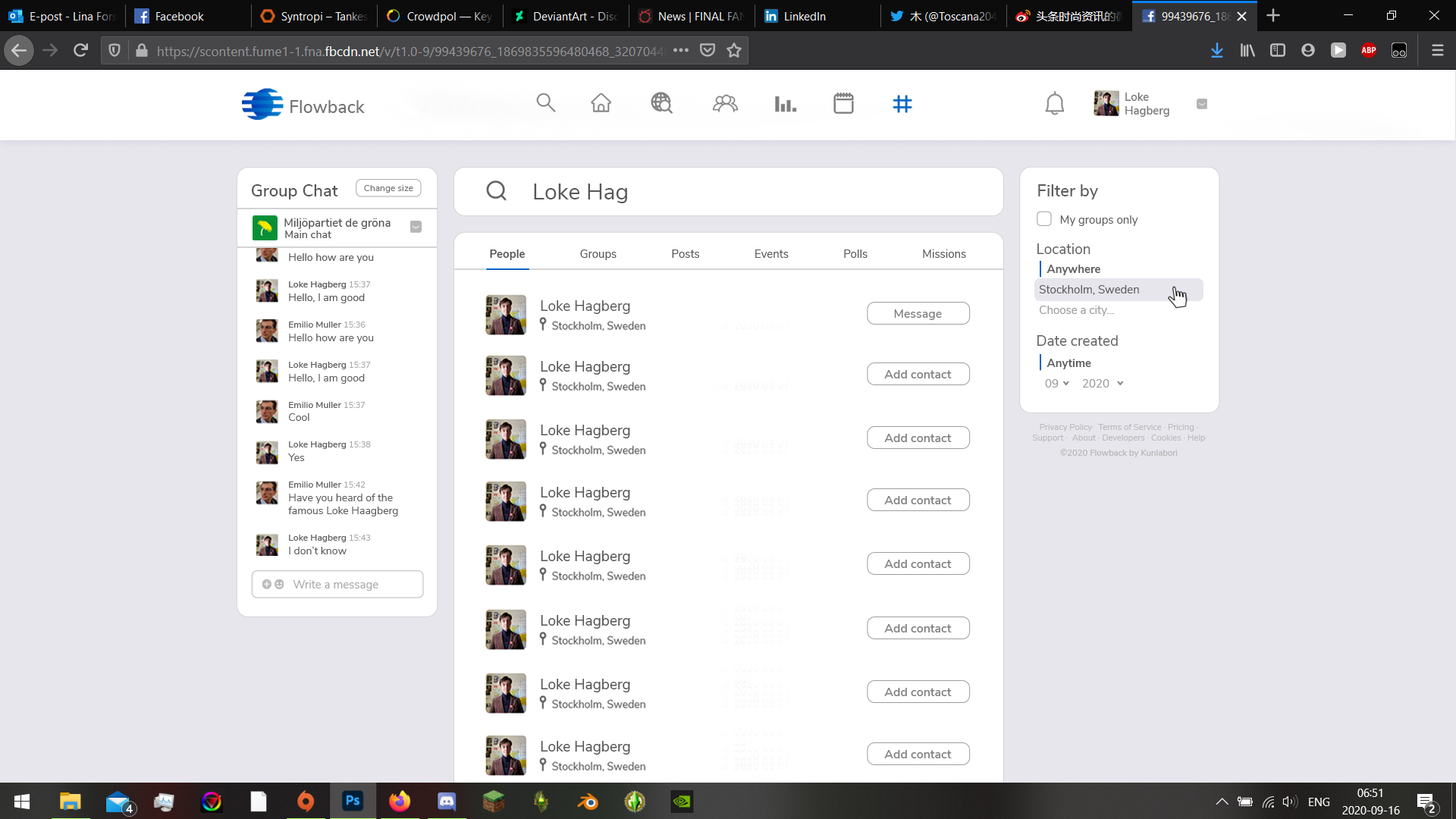
<style>
.page{position:relative;width:1456px;height:819px;background:#ffffff}
.page>*{position:absolute;margin:0}
.t1{font:17.4px "NunitoSans-SemiBold";color:#747474}
.t2{font:11.4px "NunitoSans-SemiBold";color:#747474}
.t3{font:11.4px/22.9px "NunitoSans-SemiBold";color:#747474}
.t4{font:16.7px "NunitoSans-SemiBold";color:#575757}
.t5{font:9.1px "NunitoSans-Regular";color:#727272}
.t6{font:22.7px "NunitoSans-Regular";color:#575757}
.t7{font:11.4px/20.5px "NunitoSans-Regular";color:#5e5e5e}
.t8{font:16.7px "NunitoSans-SemiBold";color:#5e5e5e}
.t9{font:11.4px/27.8px "NunitoSans-Regular";color:#5e5e5e}
.t10{font:14.4px/30.3px "NunitoSans-Regular";color:#5e5e5e}
.t11{font:11.4px/19px "NunitoSans-Bold";color:#5e5e5e}
.t12{font:11.4px/20.5px "NunitoSans-Regular";color:#9d9d9d}
.t13{font:14.4px "NunitoSans-Regular";color:#5e5e5e}
.t14{font:11.4px/18.1px "NunitoSans-SemiBold";color:#575757}
.t15{font:13.6px/18.1px "NunitoSans-Regular";color:#ececec}
.t16{font:10.6px "NunitoSans-SemiBold";color:#575757}
.t17{font:11.4px "NunitoSans-Regular";color:#575757}
.t18{font:16.3px "NunitoSans-SemiBold";color:#5e5e5e}
.t19{font:11.4px "NunitoSans-Bold";color:#575757}
.t20{font:14.4px "NunitoSans-Regular";color:#575757}
.t21{font:12.1px "NunitoSans-SemiBold";color:#7e7e7e}
.t22{font:10.6px/13.6px "NunitoSans-Regular";color:#5e5e5e}
.t23{font:9.1px/13.3px "NunitoSans-SemiBold";color:#5e5e5e}
.t24{font:8.3px/13.3px "NunitoSans-Regular";color:#a8a8a8}
.t25{font:10.6px/13.3px "NunitoSans-Regular";color:#5e5e5e}
.t26{font:8.5px "NunitoSans-Regular";color:#bababa}
.t27{font:8.5px/15.2px "NunitoSans-SemiBold";color:#bababa}
.t28{font:11.4px "NunitoSans-Regular";color:#aaaaaa}
.t29{font:8.5px "NunitoSans-Regular";color:#aaaaaa}
</style>
<div class="page">
<p class="t1" style="left:290px;top:100px;width:75px;height:13px">Flowback</p>
<p class="t2" style="left:1125px;top:93px;width:44px;height:24px"><span class="t3">Loke<br></span>Hagberg</p>
<p class="t4" style="left:252px;top:184px;width:86px;height:15px">Group Chat</p>
<p class="t5" style="left:364px;top:185px;width:49px;height:8px">Change size</p>
<p class="t6" style="left:534px;top:184px;width:93px;height:19px">Loke Hag</p>
<p class="t7" style="left:1037px;top:184px;width:102px;height:204px"><span class="t8">Filter by<br>  </span><span class="t9">My groups only<br></span><span class="t10">Location<br>   </span><span class="t11">Anywhere<br></span> Stockholm, Sweden<br> <span class="t12">Choose a city...<br><br></span><span class="t13">Date created<br>   </span><span class="t11">Anytime<br>   </span><span class="t12">09        2020</span></p>
<p class="t14" style="left:284px;top:218px;width:107px;height:20px"><span class="t15">           </span>Miljöpartiet de gröna<br>    <span class="t16">Main chat</span></p>
<p class="t17" style="left:490px;top:249px;width:476px;height:11px"><span class="t18"><br></span><span class="t19">People</span>      Groups      Posts      Events      Polls      Missions</p>
<p class="t20" style="left:541px;top:300px;width:89px;height:14px">Loke Hagberg</p>
<p class="t21" style="left:894px;top:309px;width:48px;height:11px">Message</p>
<p class="t22" style="left:287px;top:322px;width:111px;height:232px"><span class="t23">Emilio Muller </span><span class="t24">15:36<br></span><span class="t25">Hello how are you<br><br></span><span class="t23">Loke Hagberg </span><span class="t24">15:37<br></span>Hello, I am good<br><br><span class="t23">Emilio Muller </span><span class="t24">15:37<br></span><span class="t25">Cool<br><br></span><span class="t23">Loke Hagberg </span><span class="t24">15:38<br></span><span class="t25">Yes<br><br></span><span class="t23">Emilio Muller </span><span class="t24">15:42<br></span>Have you heard of the <br><span class="t25">famous Loke Haagberg<br><br></span><span class="t23">Loke Hagberg </span><span class="t24">15:43<br></span><span class="t25">I don’t know</span></p>
<p class="t26" style="left:1032px;top:424px;width:174px;height:33px;text-align:center">Privacy Policy·  Terms of Service · Pricing · <br>Support ·  About · Developers · Cookies · Help<br><span class="t27">©2020 Flowback by Kunlabori</span></p>
<p class="t28" style="left:293px;top:580px;width:85px;height:11px"><span class="t29">     </span>Write a message</p>
</div>
